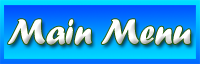
<style>
.page{position:relative;width:200px;height:64px}
.page>*{position:absolute;margin:0}
.t1{font:36.7px "ForteMT";color:#ffffff;scale:0.96 1}
</style>
<div class="page">
<p class="t1" style="left:8px;top:19px;width:183px;height:26px">Main Menu</p>
</div>
